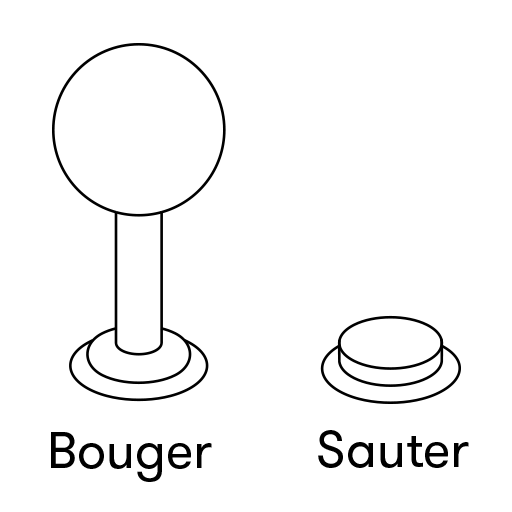
<style>
.page{position:relative;width:512px;height:512px;background:#ffffff}
.page>*{position:absolute;margin:0}
.t1{font:51.8px "GTWalsheimRegular";color:#000000}
</style>
<div class="page">
<p class="t1" style="left:51px;top:432px;width:161px;height:50px">Bouger</p>
<p class="t1" style="left:318px;top:430px;width:151px;height:38px">Sauter</p>
</div>
